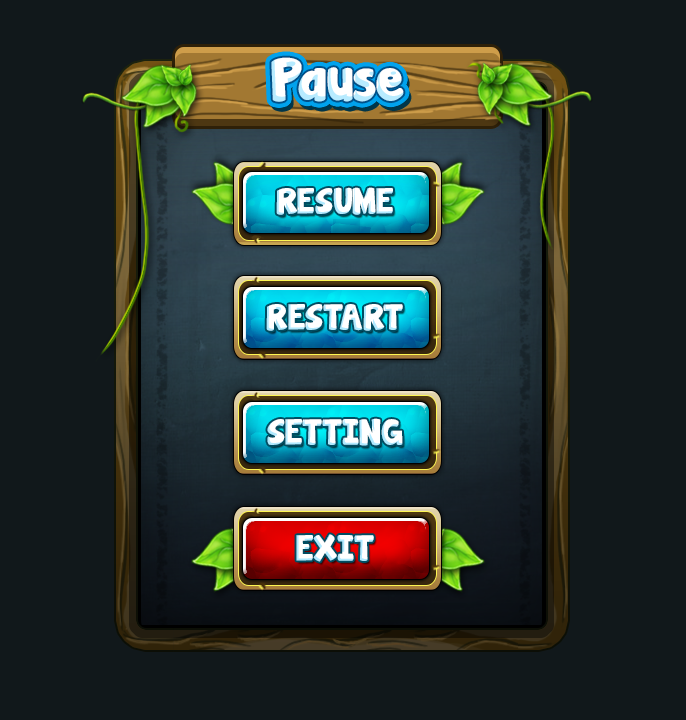
<style>
.page{position:relative;width:686px;height:720px;background:#11181b}
.page>*{position:absolute;margin:0}
.t1{font:54.4px "JandaManateeSolid";color:#ffffff}
.t2{font:32.4px "JandaManateeSolid";color:#ffffff;text-transform:uppercase}
</style>
<div class="page">
<p class="t1" style="left:271px;top:57px;width:133px;height:45px">Pause</p>
<p class="t2" style="left:276px;top:187px;width:117px;height:28px">Resume</p>
<p class="t2" style="left:266px;top:304px;width:137px;height:27px">Restart</p>
<p class="t2" style="left:267px;top:418px;width:136px;height:28px">Setting</p>
<p class="t2" style="left:296px;top:534px;width:78px;height:28px">Exit</p>
</div>
